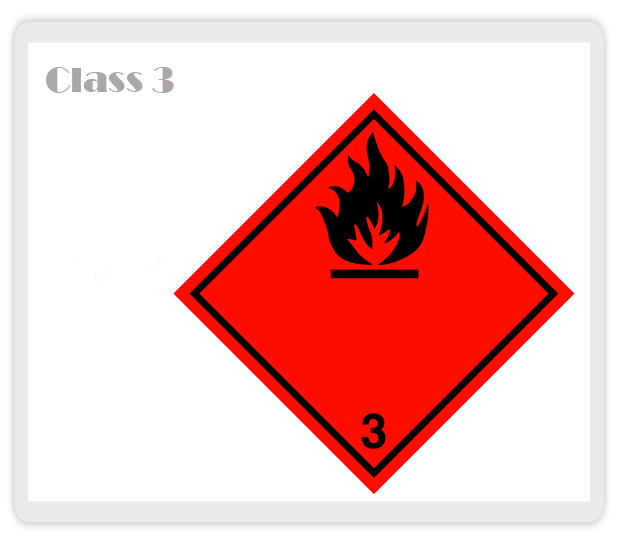
<style>
.page{position:relative;width:618px;height:544px;background:#ffffff}
.page>*{position:absolute;margin:0}
.t1{font:36px "Broadway";color:#aca7a7}
</style>
<div class="page">
<p class="t1" style="left:46px;top:67px;width:128px;height:26px">Class 3</p>
</div>
